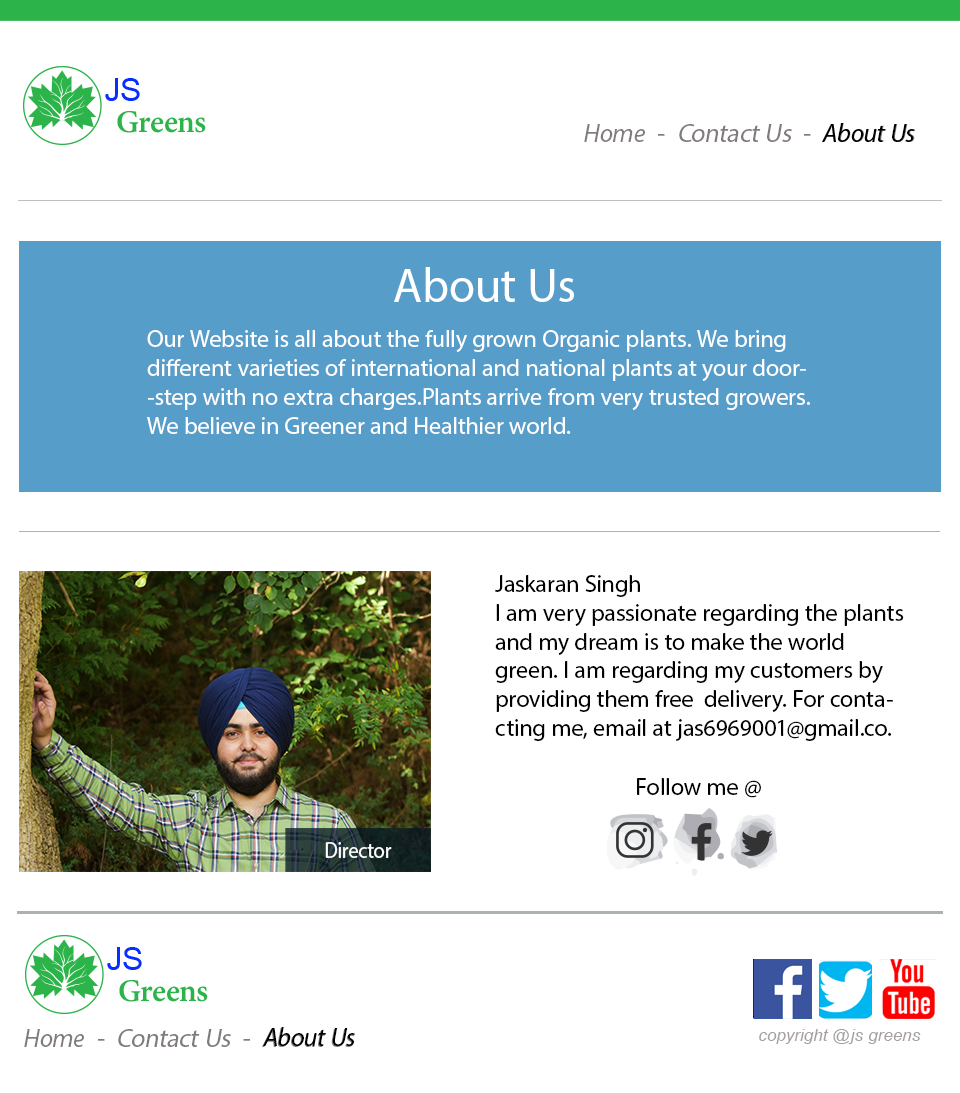
<style>
.page{position:relative;width:960px;height:1093px;background:#ffffff}
.page>*{position:absolute;margin:0}
.t1{font:26px "MyriadPro-Regular";letter-spacing:0.005em;color:#827b7b;font-style:italic}
.t2{font:26px "MyriadPro-It";letter-spacing:0.005em;color:#827b7b}
.t3{font:26px "MyriadPro-Regular";letter-spacing:0.005em;color:#827b7b}
.t4{font:26px "MyriadPro-It";letter-spacing:0.005em;color:#000000}
.t5{font:48px "MyriadPro-Regular";letter-spacing:0.005em;color:#ffffff}
.t6{font:24px "MyriadPro-Regular";letter-spacing:0.005em;color:#ffffff}
.t7{font:24px "MyriadPro-Regular";letter-spacing:0.005em;color:#000000}
.t8{font:17.4px "Arial-ItalicMT";letter-spacing:0.005em;color:#a59fa3}
</style>
<div class="page">
<p class="t1" style="left:584px;top:123px;width:332px;height:19px"><span class="t2">Home  </span><span class="t3">-  </span>Contact Us  <span class="t3">-  </span><span class="t2">About Us</span></p>
<p class="t4" style="left:822px;top:123px;width:93px;height:19px">About Us</p>
<p class="t5" style="left:394px;top:267px;width:180px;height:35px">About Us</p>
<p class="t6" style="left:147px;top:330px;width:663px;height:104px">Our Website is all about the fully grown Organic plants. We bring <br>different varieties of international and national plants at your door-<br>-step with no extra charges.Plants arrive from very trusted growers.<br>We believe in Greener and Healthier world.</p>
<p class="t7" style="left:495px;top:575px;width:409px;height:166px">Jaskaran Singh <br>I am very passionate regarding the plants<br>and my dream is to make the world <br>green. I am regarding my customers by<br>providing them free  delivery. For conta-<br>cting me, email at jas6969001@gmail.co.</p>
<p class="t7" style="left:637px;top:778px;width:124px;height:20px">Follow me @</p>
<p class="t1" style="left:24px;top:1028px;width:331px;height:19px"><span class="t2">Home  </span><span class="t3">-  </span>Contact Us  <span class="t3">-  </span><span class="t2">About Us</span></p>
<p class="t4" style="left:263px;top:1027px;width:92px;height:19px">About Us</p>
<p class="t8" style="left:759px;top:1029px;width:162px;height:15px">copyright @js greens</p>
</div>
